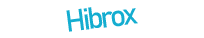
<style>
.page{position:relative;width:204px;height:38px;background:#ffffff}
.page>*{position:absolute;margin:0}
.t1{font:30px "Bahnschrift";letter-spacing:-0.1em;color:#14add0}
</style>
<div class="page">
<p class="t1" style="left:66px;top:7px;width:72px;height:25px;rotate:-7deg">Hibrox</p>
</div>
